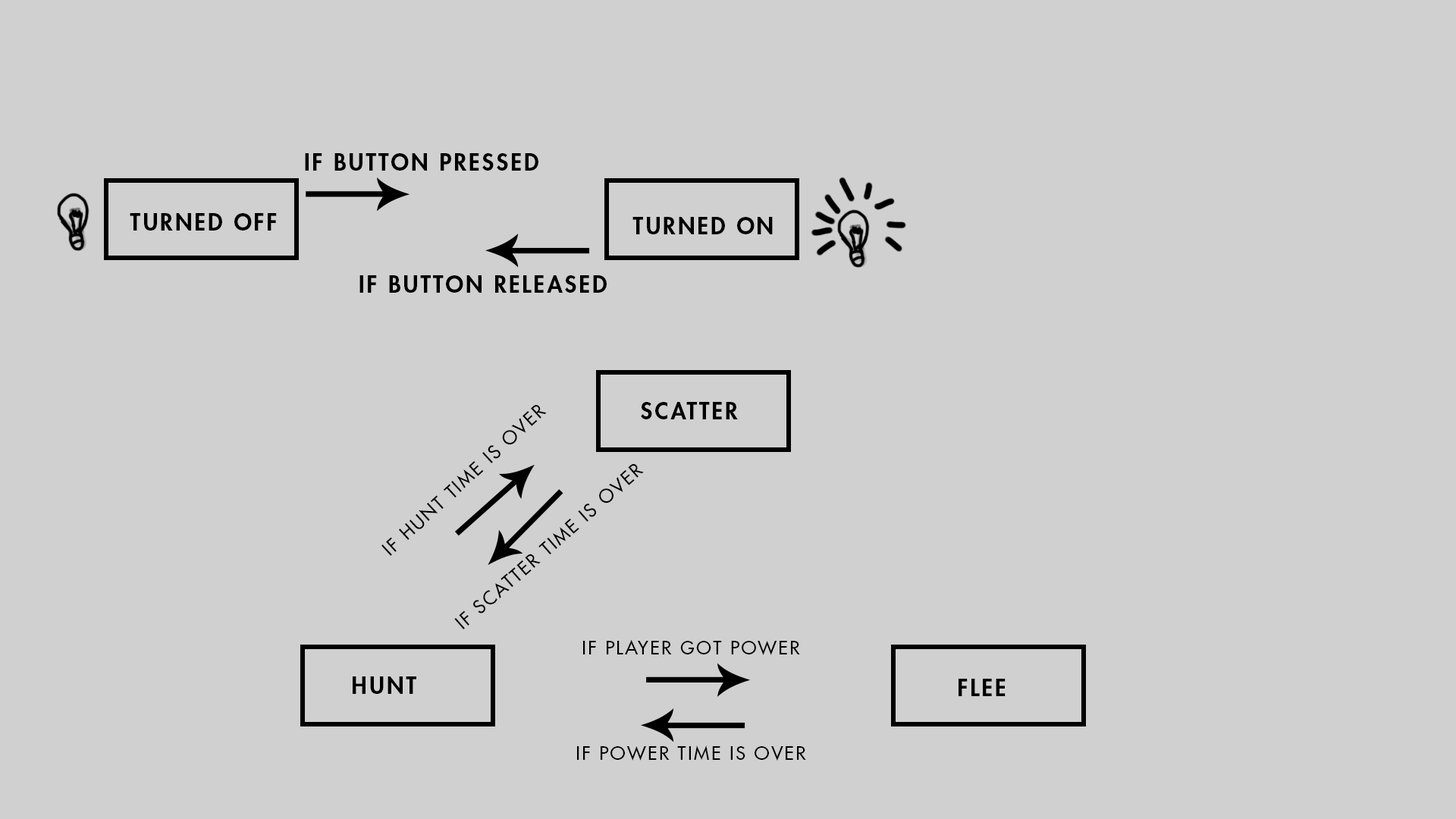
<style>
.page{position:relative;width:1456px;height:819px;background:#d0d0d0}
.page>*{position:absolute;margin:0}
.t1{font:22.7px "FuturaStd-Heavy";letter-spacing:0.1em;color:#000000;text-transform:uppercase}
.t2{font:18.2px "FuturaStd-Medium";letter-spacing:0.1em;color:#000000;text-transform:uppercase}
</style>
<div class="page">
<p class="t1" style="left:305px;top:153px;width:233px;height:18px">If Button Pressed</p>
<p class="t1" style="left:130px;top:213px;width:147px;height:18px">Turned off</p>
<p class="t1" style="left:632px;top:217px;width:141px;height:17px">Turned on</p>
<p class="t1" style="left:359px;top:275px;width:248px;height:18px">If Button released</p>
<p class="t1" style="left:641px;top:402px;width:97px;height:17px">Scatter</p>
<p class="t2" style="left:381px;top:405px;width:166px;height:151px;rotate:-43deg">If Hunt time is over</p>
<p class="t2" style="left:454px;top:463px;width:190px;height:166px;rotate:-41deg">IF Scatter Time is over</p>
<p class="t2" style="left:583px;top:639px;width:217px;height:16px">If Player Got Power</p>
<p class="t1" style="left:353px;top:676px;width:63px;height:18px">HUNT</p>
<p class="t1" style="left:959px;top:679px;width:47px;height:17px">Flee</p>
<p class="t2" style="left:577px;top:745px;width:229px;height:16px">If Power Time is Over</p>
</div>
